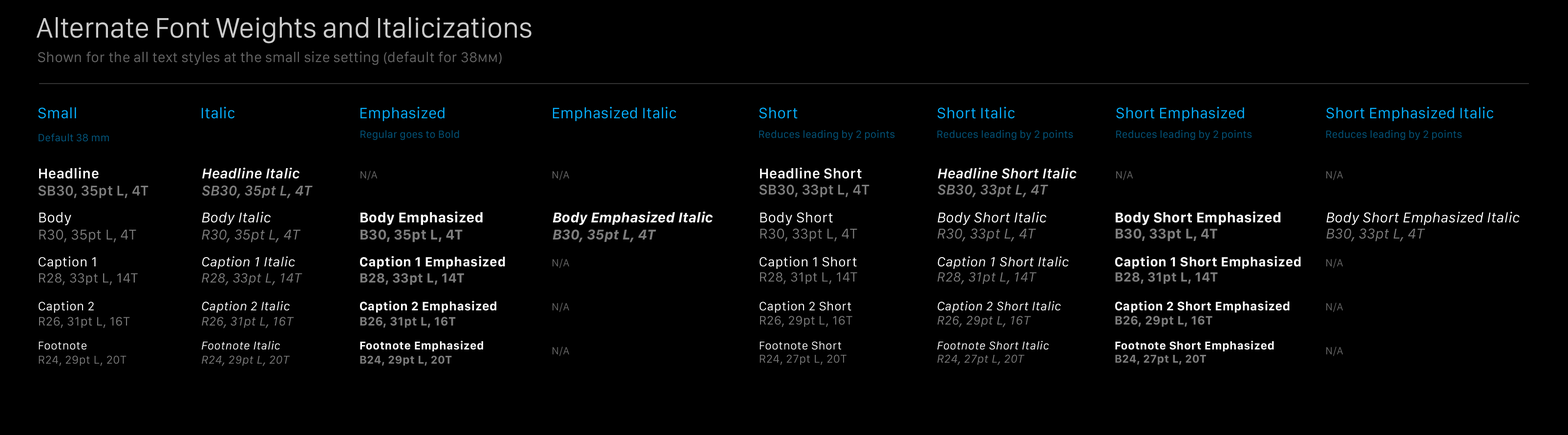
<style>
.page{position:relative;width:1568px;height:435px;background:#000000}
.page>*{position:absolute;margin:0}
.t1{font:29.3px "SanFranciscoDisplay-Regular";letter-spacing:-0.005em;color:#cccccc}
.t2{font:14.7px "SanFranciscoText-Regular";letter-spacing:-0.005em;color:#666666}
.t3{font:14.7px "SanFranciscoText-Regular";letter-spacing:-0.005em;color:#666666;font-variant:small-caps}
.t4{font:15.6px "SanFranciscoText-Regular";color:#06b0ff}
.t5{font:10.7px "SanFranciscoText-Regular";color:#035880}
.t6{font:10.7px "SanFranciscoText-Regular";color:#03567d}
.t7{font:14.7px/17.1px "SanFranciscoText-Semibold";letter-spacing:0.004em;color:#7d7d7d}
.t8{font:14.7px/17.1px "SanFranciscoText-Semibold";letter-spacing:0.004em;color:#ffffff}
.t9{font:14.7px/17.1px "SanFranciscoText-SemiboldItalic";letter-spacing:0.004em;color:#7d7d7d}
.t10{font:14.7px/17.1px "SanFranciscoText-SemiboldItalic";letter-spacing:0.004em;color:#ffffff}
.t11{font:10.7px "SanFranciscoText-Regular";color:#666666}
.t12{font:14.7px/16.1px "SanFranciscoText-Semibold";letter-spacing:0.004em;color:#7d7d7d}
.t13{font:14.7px/16.1px "SanFranciscoText-Semibold";letter-spacing:0.004em;color:#ffffff}
.t14{font:14.7px/16.1px "SanFranciscoText-SemiboldItalic";letter-spacing:0.004em;color:#ffffff}
.t15{font:14.7px/16.1px "SanFranciscoText-SemiboldItalic";letter-spacing:0.004em;color:#7d7d7d}
.t16{font:14.7px/17.1px "SanFranciscoText-Regular";letter-spacing:0.004em;color:#7d7d7d}
.t17{font:14.7px/17.1px "SanFranciscoText-Regular";letter-spacing:0.004em;color:#ffffff}
.t18{font:14.7px/17.1px "SanFranciscoText-Italic";letter-spacing:0.004em;color:#7d7d7d}
.t19{font:14.7px/17.1px "SanFranciscoText-Italic";letter-spacing:0.004em;color:#ffffff}
.t20{font:14.7px/17.1px "SanFranciscoText-Bold";letter-spacing:0.004em;color:#ffffff}
.t21{font:14.7px/17.1px "SanFranciscoText-Bold";letter-spacing:0.004em;color:#7d7d7d}
.t22{font:14.7px/17.1px "SanFranciscoText-BoldItalic";letter-spacing:0.004em;color:#ffffff}
.t23{font:14.7px/17.1px "SanFranciscoText-BoldItalic";letter-spacing:0.004em;color:#7d7d7d}
.t24{font:14.7px/16.1px "SanFranciscoText-Regular";letter-spacing:0.004em;color:#7d7d7d}
.t25{font:14.7px/16.1px "SanFranciscoText-Regular";letter-spacing:0.004em;color:#ffffff}
.t26{font:14.7px/16.1px "SanFranciscoText-Italic";letter-spacing:0.004em;color:#ffffff}
.t27{font:14.7px/16.1px "SanFranciscoText-Italic";letter-spacing:0.004em;color:#7d7d7d}
.t28{font:14.7px/16.1px "SanFranciscoText-Bold";letter-spacing:0.004em;color:#ffffff}
.t29{font:14.7px/16.1px "SanFranciscoText-Bold";letter-spacing:0.004em;color:#7d7d7d}
.t30{font:13.7px/16.1px "SanFranciscoText-Regular";letter-spacing:0.014em;color:#7d7d7d}
.t31{font:13.7px/16.1px "SanFranciscoText-Regular";letter-spacing:0.014em;color:#ffffff}
.t32{font:13.7px/16.1px "SanFranciscoText-Italic";letter-spacing:0.014em;color:#ffffff}
.t33{font:13.7px/16.1px "SanFranciscoText-Italic";letter-spacing:0.014em;color:#7d7d7d}
.t34{font:13.7px/16.1px "SanFranciscoText-Bold";letter-spacing:0.014em;color:#ffffff}
.t35{font:13.7px/16.1px "SanFranciscoText-Bold";letter-spacing:0.014em;color:#7d7d7d}
.t36{font:13.7px/15.1px "SanFranciscoText-Regular";letter-spacing:0.014em;color:#7d7d7d}
.t37{font:13.7px/15.1px "SanFranciscoText-Regular";letter-spacing:0.014em;color:#ffffff}
.t38{font:13.7px/15.1px "SanFranciscoText-Italic";letter-spacing:0.014em;color:#ffffff}
.t39{font:13.7px/15.1px "SanFranciscoText-Italic";letter-spacing:0.014em;color:#7d7d7d}
.t40{font:13.7px/15.1px "SanFranciscoText-Bold";letter-spacing:0.014em;color:#ffffff}
.t41{font:13.7px/15.1px "SanFranciscoText-Bold";letter-spacing:0.014em;color:#7d7d7d}
.t42{font:12.7px/15.1px "SanFranciscoText-Regular";letter-spacing:0.016em;color:#7d7d7d}
.t43{font:12.7px/15.1px "SanFranciscoText-Regular";letter-spacing:0.016em;color:#ffffff}
.t44{font:12.7px/15.1px "SanFranciscoText-Italic";letter-spacing:0.016em;color:#ffffff}
.t45{font:12.7px/15.1px "SanFranciscoText-Italic";letter-spacing:0.016em;color:#7d7d7d}
.t46{font:12.7px/15.1px "SanFranciscoText-Bold";letter-spacing:0.016em;color:#ffffff}
.t47{font:12.7px/15.1px "SanFranciscoText-Bold";letter-spacing:0.016em;color:#7d7d7d}
.t48{font:12.7px/14.2px "SanFranciscoText-Regular";letter-spacing:0.016em;color:#7d7d7d}
.t49{font:12.7px/14.2px "SanFranciscoText-Regular";letter-spacing:0.016em;color:#ffffff}
.t50{font:12.7px/14.2px "SanFranciscoText-Italic";letter-spacing:0.016em;color:#ffffff}
.t51{font:12.7px/14.2px "SanFranciscoText-Italic";letter-spacing:0.016em;color:#7d7d7d}
.t52{font:12.7px/14.2px "SanFranciscoText-Bold";letter-spacing:0.016em;color:#ffffff}
.t53{font:12.7px/14.2px "SanFranciscoText-Bold";letter-spacing:0.016em;color:#7d7d7d}
.t54{font:11.7px/14.2px "SanFranciscoText-Regular";letter-spacing:0.02em;color:#7d7d7d}
.t55{font:11.7px/14.2px "SanFranciscoText-Regular";letter-spacing:0.02em;color:#ffffff}
.t56{font:11.7px/14.2px "SanFranciscoText-Italic";letter-spacing:0.02em;color:#7d7d7d}
.t57{font:11.7px/14.2px "SanFranciscoText-Italic";letter-spacing:0.02em;color:#ffffff}
.t58{font:11.7px/14.2px "SanFranciscoText-Bold";letter-spacing:0.02em;color:#ffffff}
.t59{font:11.7px/14.2px "SanFranciscoText-Bold";letter-spacing:0.02em;color:#7d7d7d}
.t60{font:11.7px/13.2px "SanFranciscoText-Regular";letter-spacing:0.02em;color:#7d7d7d}
.t61{font:11.7px/13.2px "SanFranciscoText-Regular";letter-spacing:0.02em;color:#ffffff}
.t62{font:11.7px/13.2px "SanFranciscoText-Italic";letter-spacing:0.02em;color:#ffffff}
.t63{font:11.7px/13.2px "SanFranciscoText-Italic";letter-spacing:0.02em;color:#7d7d7d}
.t64{font:11.7px/13.2px "SanFranciscoText-Bold";letter-spacing:0.02em;color:#ffffff}
.t65{font:11.7px/13.2px "SanFranciscoText-Bold";letter-spacing:0.02em;color:#7d7d7d}
</style>
<div class="page">
<p class="t1" style="left:36px;top:17px;width:495px;height:26px">Alternate Font Weights and Italicizations</p>
<p class="t2" style="left:38px;top:51px;width:464px;height:14px">Shown for the all text styles at the small size setting (default for 38<span class="t3">mm</span>)</p>
<p class="t4" style="left:38px;top:107px;width:38px;height:12px">Small</p>
<p class="t4" style="left:202px;top:106px;width:32px;height:13px">Italic</p>
<p class="t4" style="left:360px;top:106px;width:85px;height:15px">Emphasized</p>
<p class="t4" style="left:553px;top:106px;width:123px;height:15px">Emphasized Italic</p>
<p class="t4" style="left:759px;top:107px;width:39px;height:12px">Short</p>
<p class="t4" style="left:937px;top:106px;width:78px;height:13px">Short Italic</p>
<p class="t4" style="left:1116px;top:106px;width:128px;height:15px">Short Emphasized</p>
<p class="t4" style="left:1326px;top:106px;width:167px;height:15px">Short Emphasized Italic</p>
<p class="t5" style="left:39px;top:133px;width:70px;height:9px">Default 38 mm</p>
<p class="t6" style="left:360px;top:130px;width:99px;height:10px">Regular goes to Bold</p>
<p class="t6" style="left:759px;top:130px;width:136px;height:10px">Reduces leading by 2 points</p>
<p class="t6" style="left:937px;top:130px;width:136px;height:10px">Reduces leading by 2 points</p>
<p class="t6" style="left:1116px;top:130px;width:136px;height:10px">Reduces leading by 2 points</p>
<p class="t6" style="left:1326px;top:130px;width:136px;height:10px">Reduces leading by 2 points</p>
<p class="t7" style="left:38px;top:167px;width:110px;height:31px"><span class="t8">Headline<br></span>SB30, 35pt L, 4T</p>
<p class="t9" style="left:202px;top:168px;width:111px;height:30px"><span class="t10">Headline Italic<br></span>SB30, 35pt L, 4T</p>
<p class="t11" style="left:360px;top:170px;width:18px;height:10px">N/A</p>
<p class="t11" style="left:552px;top:170px;width:18px;height:10px">N/A</p>
<p class="t12" style="left:759px;top:167px;width:110px;height:30px"><span class="t13">Headline Short<br></span>SB30, 33pt L, 4T</p>
<p class="t14" style="left:938px;top:168px;width:139px;height:29px">Headline Short Italic<br><span class="t15">SB30, 33pt L, 4T</span></p>
<p class="t11" style="left:1116px;top:170px;width:17px;height:10px">N/A</p>
<p class="t11" style="left:1326px;top:170px;width:17px;height:10px">N/A</p>
<p class="t16" style="left:39px;top:212px;width:97px;height:30px"><span class="t17">Body<br></span>R30, 35pt L, 4T</p>
<p class="t18" style="left:202px;top:212px;width:99px;height:30px"><span class="t19">Body Italic<br></span>R30, 35pt L, 4T</p>
<p class="t20" style="left:360px;top:211px;width:123px;height:31px">Body Emphasized<br><span class="t21">B30, 35pt L, 4T</span></p>
<p class="t22" style="left:552px;top:211px;width:161px;height:31px">Body Emphasized Italic<br><span class="t23">B30, 35pt L, 4T</span></p>
<p class="t24" style="left:760px;top:212px;width:97px;height:29px"><span class="t25">Body Short<br></span>R30, 33pt L, 4T</p>
<p class="t26" style="left:937px;top:212px;width:109px;height:29px">Body Short Italic<br><span class="t27">R30, 33pt L, 4T</span></p>
<p class="t28" style="left:1116px;top:211px;width:165px;height:30px">Body Short Emphasized<br><span class="t29">B30, 33pt L, 4T</span></p>
<p class="t26" style="left:1326px;top:212px;width:194px;height:29px">Body Short Emphasized Italic<br><span class="t27">B30, 33pt L, 4T</span></p>
<p class="t30" style="left:39px;top:256px;width:99px;height:29px"><span class="t31">Caption 1<br></span>R28, 33pt L, 14T</p>
<p class="t32" style="left:202px;top:256px;width:100px;height:29px">Caption 1 Italic<br><span class="t33">R28, 33pt L, 14T</span></p>
<p class="t34" style="left:360px;top:256px;width:145px;height:29px">Caption 1 Emphasized<br><span class="t35">B28, 33pt L, 14T</span></p>
<p class="t36" style="left:760px;top:256px;width:97px;height:28px"><span class="t37">Caption 1 Short<br></span>R28, 31pt L, 14T</p>
<p class="t38" style="left:937px;top:256px;width:132px;height:28px">Caption 1 Short Italic<br><span class="t39">R28, 31pt L, 14T</span></p>
<p class="t40" style="left:1115px;top:256px;width:186px;height:28px">Caption 1 Short Emphasized<br><span class="t41">B28, 31pt L, 14T</span></p>
<p class="t11" style="left:552px;top:258px;width:18px;height:10px">N/A</p>
<p class="t11" style="left:1326px;top:258px;width:17px;height:10px">N/A</p>
<p class="t42" style="left:39px;top:301px;width:91px;height:27px"><span class="t43">Caption 2<br></span>R26, 31pt L, 16T</p>
<p class="t44" style="left:202px;top:301px;width:92px;height:27px">Caption 2 Italic<br><span class="t45">R26, 31pt L, 16T</span></p>
<p class="t46" style="left:360px;top:300px;width:136px;height:28px">Caption 2 Emphasized<br><span class="t47">B26, 31pt L, 16T</span></p>
<p class="t11" style="left:552px;top:302px;width:18px;height:10px">N/A</p>
<p class="t48" style="left:760px;top:301px;width:92px;height:26px"><span class="t49">Caption 2 Short<br></span>R26, 29pt L, 16T</p>
<p class="t50" style="left:937px;top:301px;width:124px;height:26px">Caption 2 Short Italic<br><span class="t51">R26, 29pt L, 16T</span></p>
<p class="t52" style="left:1115px;top:300px;width:175px;height:27px">Caption 2 Short Emphasized<br><span class="t53">B26, 29pt L, 16T</span></p>
<p class="t11" style="left:1326px;top:302px;width:17px;height:10px">N/A</p>
<p class="t54" style="left:39px;top:341px;width:88px;height:25px"><span class="t55">Footnote<br></span>R24, 29pt L, 20T</p>
<p class="t56" style="left:202px;top:340px;width:88px;height:26px"><span class="t57">Footnote Italic<br></span>R24, 29pt L, 20T</p>
<p class="t58" style="left:360px;top:340px;width:123px;height:25px">Footnote Emphasized<br><span class="t59">B24, 29pt L, 20T</span></p>
<p class="t60" style="left:760px;top:341px;width:87px;height:24px"><span class="t61">Footnote Short<br></span>R24, 27pt L, 20T</p>
<p class="t62" style="left:937px;top:340px;width:112px;height:25px">Footnote Short Italic<br><span class="t63">R24, 27pt L, 20T</span></p>
<p class="t64" style="left:1115px;top:340px;width:159px;height:24px">Footnote Short Emphasized<br><span class="t65">B24, 27pt L, 20T</span></p>
<p class="t11" style="left:552px;top:346px;width:18px;height:10px">N/A</p>
<p class="t11" style="left:1326px;top:346px;width:17px;height:10px">N/A</p>
</div>
